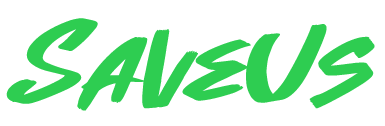
<style>
.page{position:relative;width:385px;height:126px;background:#ffffff}
.page>*{position:absolute;margin:0}
.t1{font:147px "QuickzagRegular";color:#2ecd51;font-weight:bold;scale:1.33 1}
</style>
<div class="page">
<p class="t1" style="left:6px;top:18px;width:369px;height:93px">SaveUs</p>
</div>
